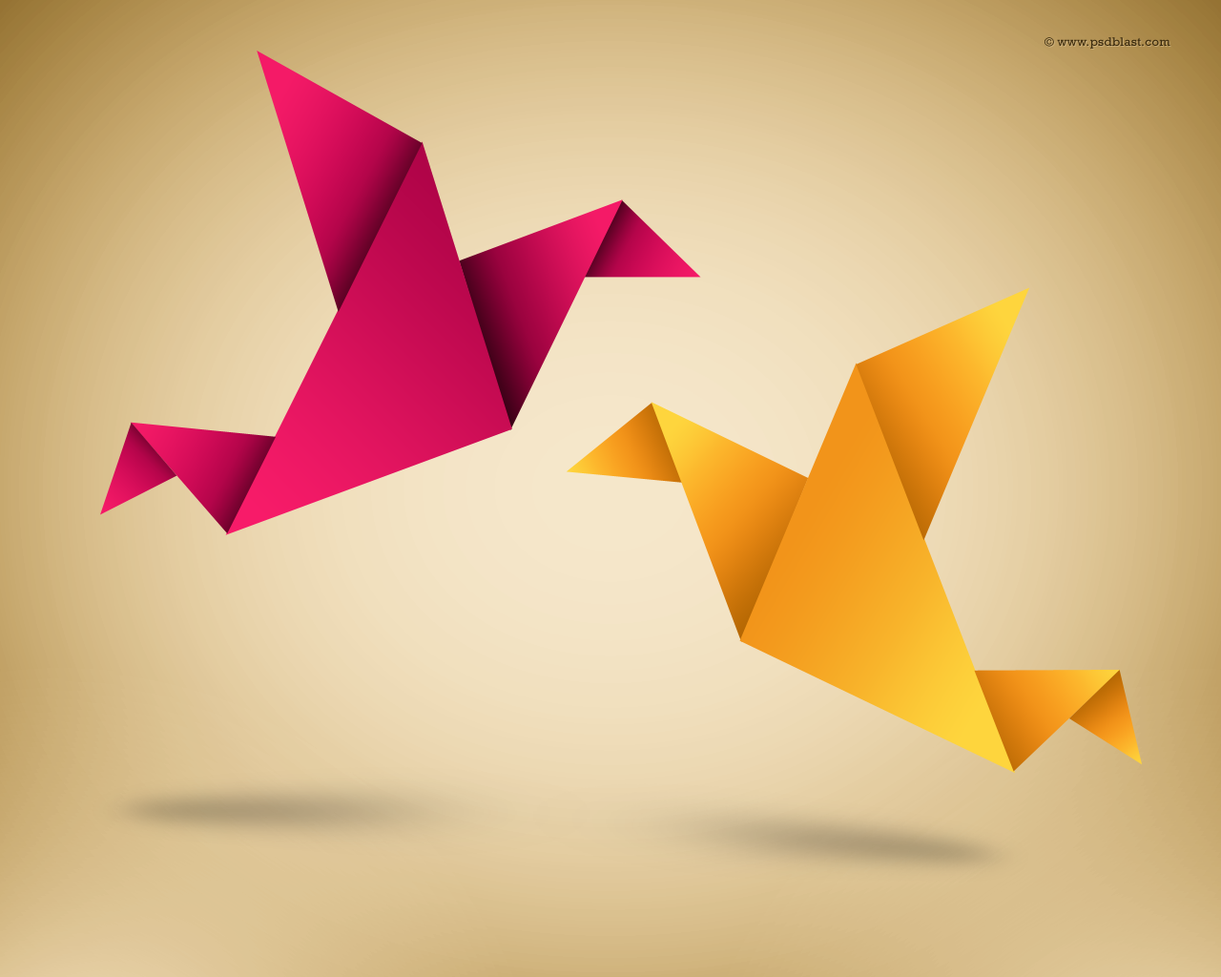
<style>
.page{position:relative;width:1221px;height:977px}
.page>*{position:absolute;margin:0}
.t1{font:12.4px "Rockwell";letter-spacing:0.025em;color:#3a2a0d}
</style>
<div class="page">
<p class="t1" style="left:1044px;top:37px;width:126px;height:12px">© www.psdblast.com</p>
</div>
